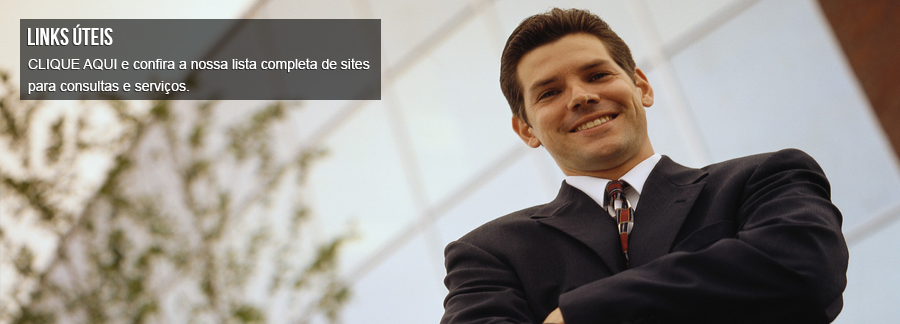
<style>
.page{position:relative;width:900px;height:324px}
.page>*{position:absolute;margin:0}
.t1{font:24px "BebasNeue";color:#ffffff;text-transform:uppercase}
.t2{font:14px/12px "ArialMT";color:#ffffff}
</style>
<div class="page">
<p class="t1" style="left:28px;top:24px;width:85px;height:21px">links úteis</p>
<p class="t2" style="left:28px;top:58px;width:342px;height:36px">CLIQUE AQUI e confira a nossa lista completa de sites <br>para consultas e serviços.</p>
</div>
